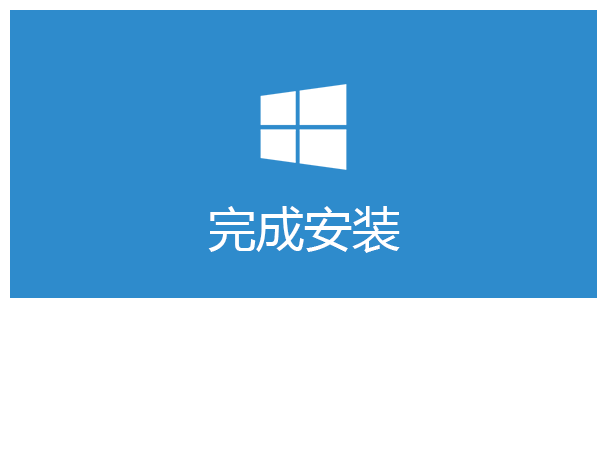
<style>
.page{position:relative;width:607px;height:457px;background:#2e8bcc}
.page>*{position:absolute;margin:0}
.t1{font:48px "MicrosoftYaHei";color:#ffffff}
</style>
<div class="page">
<p class="t1" style="left:208px;top:206px;width:192px;height:47px">完成安装</p>
</div>
